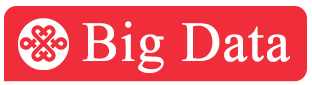
<style>
.page{position:relative;width:312px;height:85px;background:#f02d3b}
.page>*{position:absolute;margin:0}
.t1{font:56.3px "TimesNewRomanPSMT";color:#ffffff;font-weight:bold}
</style>
<div class="page">
<p class="t1" style="left:82px;top:21px;width:208px;height:52px">Big Data</p>
</div>
